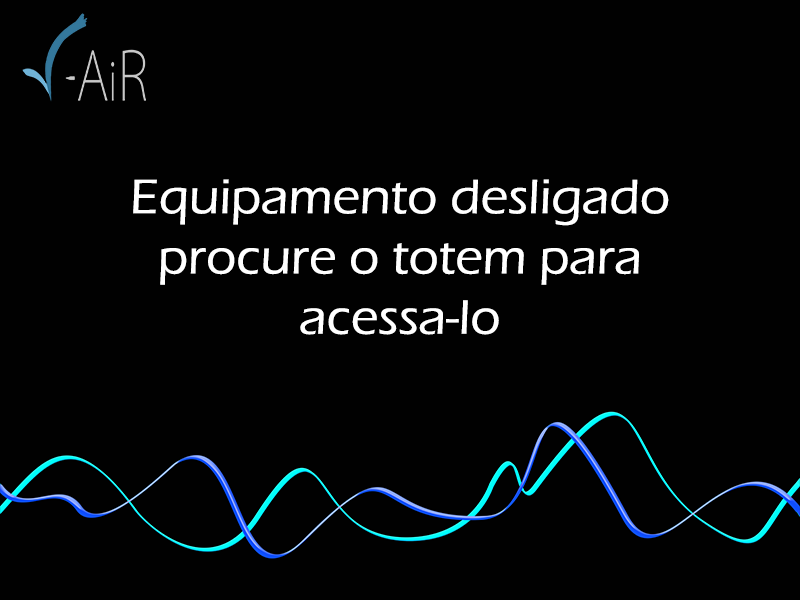
<style>
.page{position:relative;width:800px;height:600px;background:#010101}
.page>*{position:absolute;margin:0}
.t1{font:50.2px "ErasITC-Medium";color:#ffffff}
</style>
<div class="page">
<p class="t1" style="left:133px;top:179px;width:536px;height:156px;text-align:center">Equipamento desligado<br>procure o totem para acessa-lo</p>
</div>
